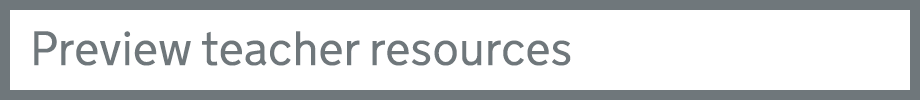
<style>
.page{position:relative;width:920px;height:100px;background:#ffffff}
.page>*{position:absolute;margin:0}
.t1{font:48px "NTA-Light";color:#6f777b}
</style>
<div class="page">
<p class="t1" style="left:34px;top:31px;width:537px;height:35px">Preview teacher resources</p>
</div>
